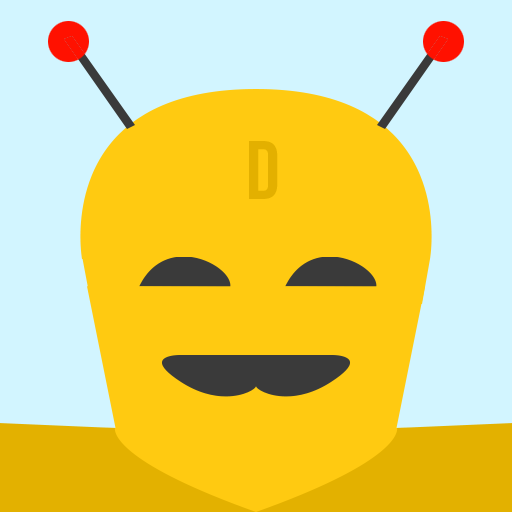
<style>
.page{position:relative;width:512px;height:512px;background:#d2f5ff}
.page>*{position:absolute;margin:0}
.t1{font:83px "BebasNeue";color:#e3b000}
</style>
<div class="page">
<p class="t1" style="left:249px;top:141px;width:29px;height:58px">D</p>
</div>
